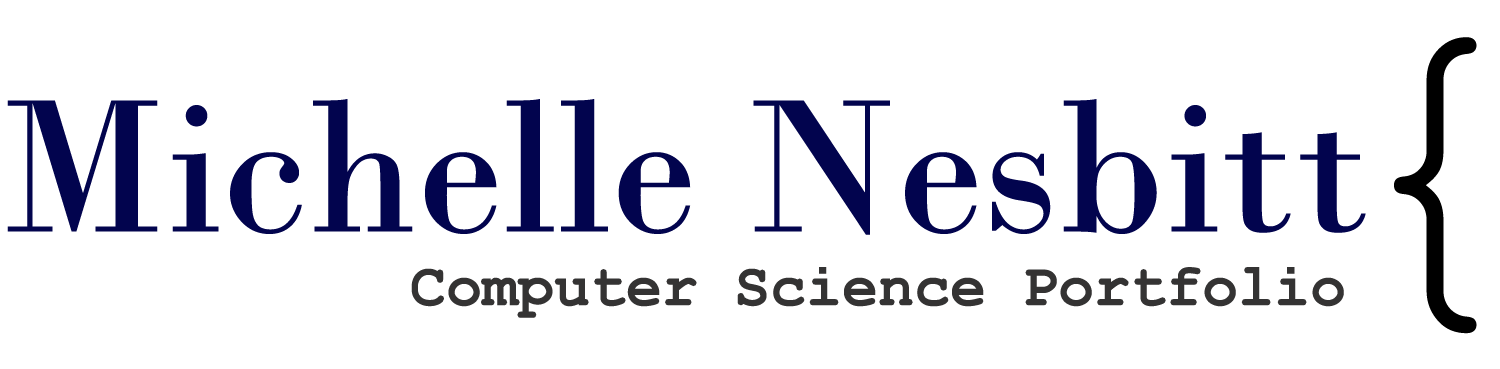
<style>
.page{position:relative;width:1500px;height:369px;background:#ffffff}
.page>*{position:absolute;margin:0}
.t1{font:400px "CourierNewPSMT";color:#000000}
.t2{font:200px "BodoniMT";color:#02044e}
.t3{font:60px "CourierNewPS-BoldMT";color:#343333}
</style>
<div class="page">
<p class="t1" style="left:1394px;top:37px;width:83px;height:297px">{</p>
<p class="t2" style="left:7px;top:99px;width:1359px;height:136px">Michelle Nesbitt</p>
<p class="t3" style="left:411px;top:267px;width:933px;height:51px">Computer Science Portfolio</p>
</div>
